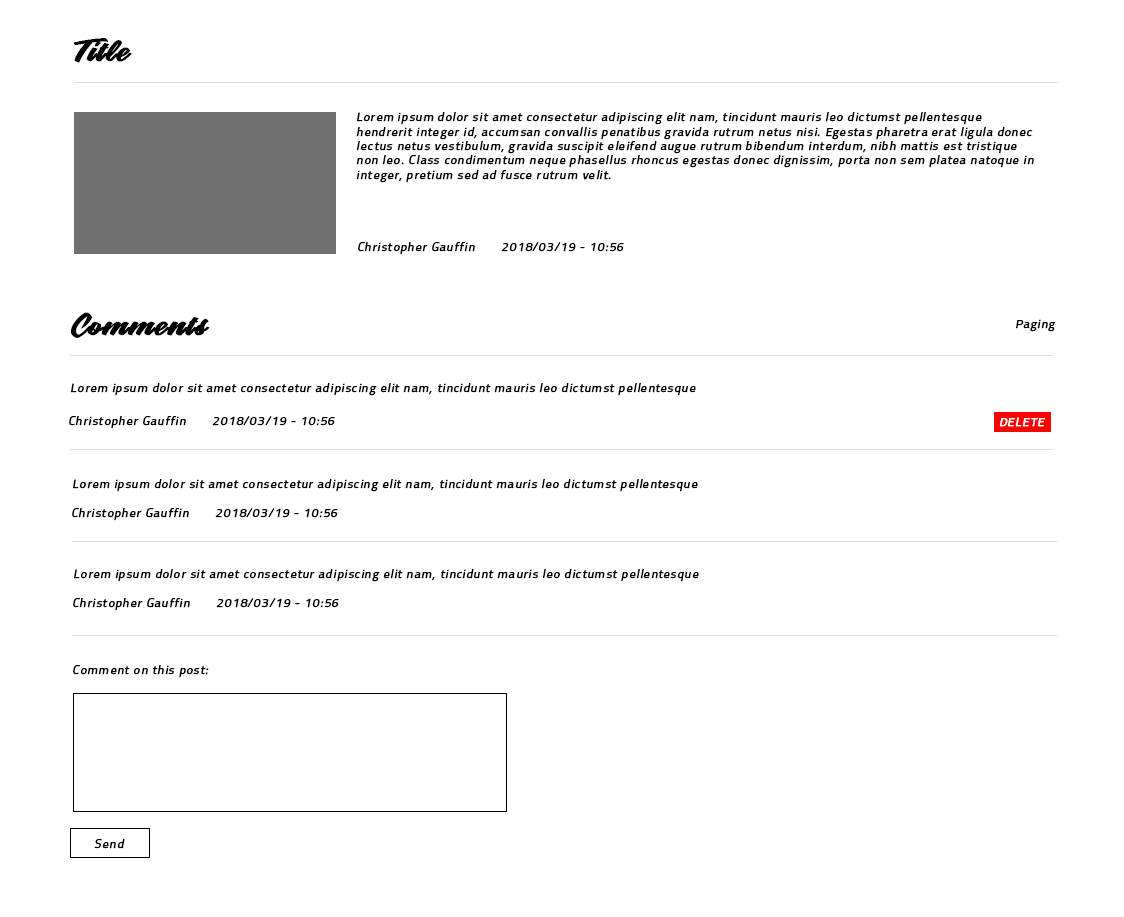
<style>
.page{position:relative;width:1124px;height:917px;background:#ffffff}
.page>*{position:absolute;margin:0}
.t1{font:24px "GracelandPersonalUse";letter-spacing:0.06em;color:#000000;font-weight:bold;font-style:italic}
.t2{font:12px "Titillium-Regular";letter-spacing:0.06em;color:#000000;font-weight:bold;font-style:italic}
.t3{font:12px "Titillium-Regular";letter-spacing:0.06em;color:#ffffff;font-weight:bold;font-style:italic}
</style>
<div class="page">
<p class="t1" style="left:73px;top:38px;width:59px;height:25px">Title</p>
<p class="t2" style="left:356px;top:112px;width:678px;height:71px">Lorem ipsum dolor sit amet consectetur adipiscing elit nam, tincidunt mauris leo dictumst pellentesque hendrerit integer id, accumsan convallis penatibus gravida rutrum netus nisi. Egestas pharetra erat ligula donec lectus netus vestibulum, gravida suscipit eleifend augue rutrum bibendum interdum, nibh mattis est tristique non leo. Class condimentum neque phasellus rhoncus egestas donec dignissim, porta non sem platea natoque in integer, pretium sed ad fusce rutrum velit.</p>
<p class="t2" style="left:358px;top:242px;width:266px;height:13px">Christopher Gauffin 2018/03/19 - 10:56</p>
<p class="t1" style="left:71px;top:312px;width:139px;height:26px">Comments</p>
<p class="t2" style="left:1015px;top:319px;width:41px;height:13px">Paging</p>
<p class="t2" style="left:70px;top:383px;width:626px;height:13px">Lorem ipsum dolor sit amet consectetur adipiscing elit nam, tincidunt mauris leo dictumst pellentesque</p>
<p class="t2" style="left:69px;top:416px;width:266px;height:13px">Christopher Gauffin 2018/03/19 - 10:56</p>
<p class="t3" style="left:999px;top:417px;width:46px;height:10px">DELETE</p>
<p class="t2" style="left:72px;top:479px;width:626px;height:13px">Lorem ipsum dolor sit amet consectetur adipiscing elit nam, tincidunt mauris leo dictumst pellentesque</p>
<p class="t2" style="left:72px;top:508px;width:266px;height:13px">Christopher Gauffin 2018/03/19 - 10:56</p>
<p class="t2" style="left:73px;top:569px;width:626px;height:13px">Lorem ipsum dolor sit amet consectetur adipiscing elit nam, tincidunt mauris leo dictumst pellentesque</p>
<p class="t2" style="left:73px;top:598px;width:266px;height:13px">Christopher Gauffin 2018/03/19 - 10:56</p>
<p class="t2" style="left:73px;top:665px;width:136px;height:13px">Comment on this post:</p>
<p class="t2" style="left:94px;top:839px;width:31px;height:10px">Send</p>
</div>
